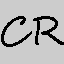
<style>
.page{position:relative;width:64px;height:64px;background:#cccccc}
.page>*{position:absolute;margin:0}
.t1{font:40px "SegoeScript";letter-spacing:0.03em;color:#000000}
</style>
<div class="page">
<p class="t1" style="left:1px;top:16px;width:64px;height:31px">CR</p>
</div>
